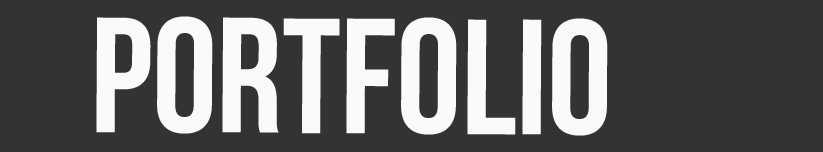
<style>
.page{position:relative;width:823px;height:152px;background:#333333}
.page>*{position:absolute;margin:0}
.t1{font:163.3px "BebasNeue";color:#fafafa}
</style>
<div class="page">
<p class="t1" style="left:96px;top:16px;width:512px;height:120px">portfolio</p>
</div>
